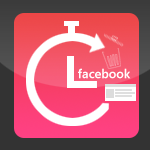
<style>
.page{position:relative;width:150px;height:150px}
.page>*{position:absolute;margin:0}
.t1{font:12.5px "SegoeUI-Semibold";color:#ffffff}
</style>
<div class="page">
<p class="t1" style="left:78px;top:68px;width:53px;height:11px">facebook</p>
</div>
